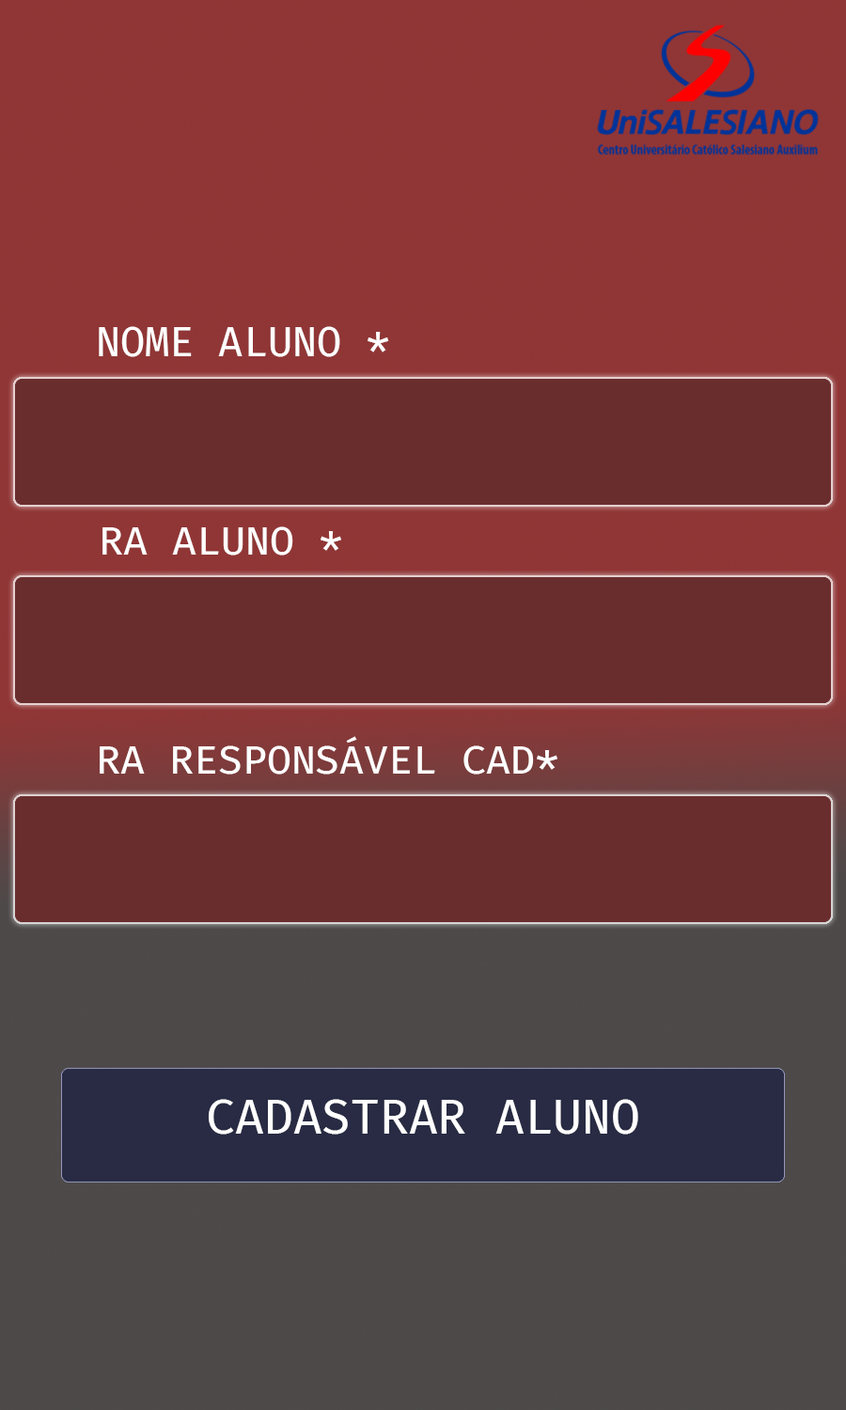
<style>
.page{position:relative;width:846px;height:1410px;background:#6a2d2e}
.page>*{position:absolute;margin:0}
.t1{font:40px "FiraCode-Retina";color:#ffffff}
.t2{font:39.7px "FiraCode-Retina";color:#ffffff}
.t3{font:47px "FiraCode-Retina";color:#ffffff}
</style>
<div class="page">
<p class="t1" style="left:99px;top:326px;width:290px;height:31px">NOME ALUNO *</p>
<p class="t2" style="left:102px;top:526px;width:239px;height:29px">RA ALUNO *</p>
<p class="t2" style="left:100px;top:736px;width:457px;height:38px">RA RESPONSÁVEL CAD*</p>
<p class="t3" style="left:209px;top:1099px;width:429px;height:35px">CADASTRAR ALUNO</p>
</div>
